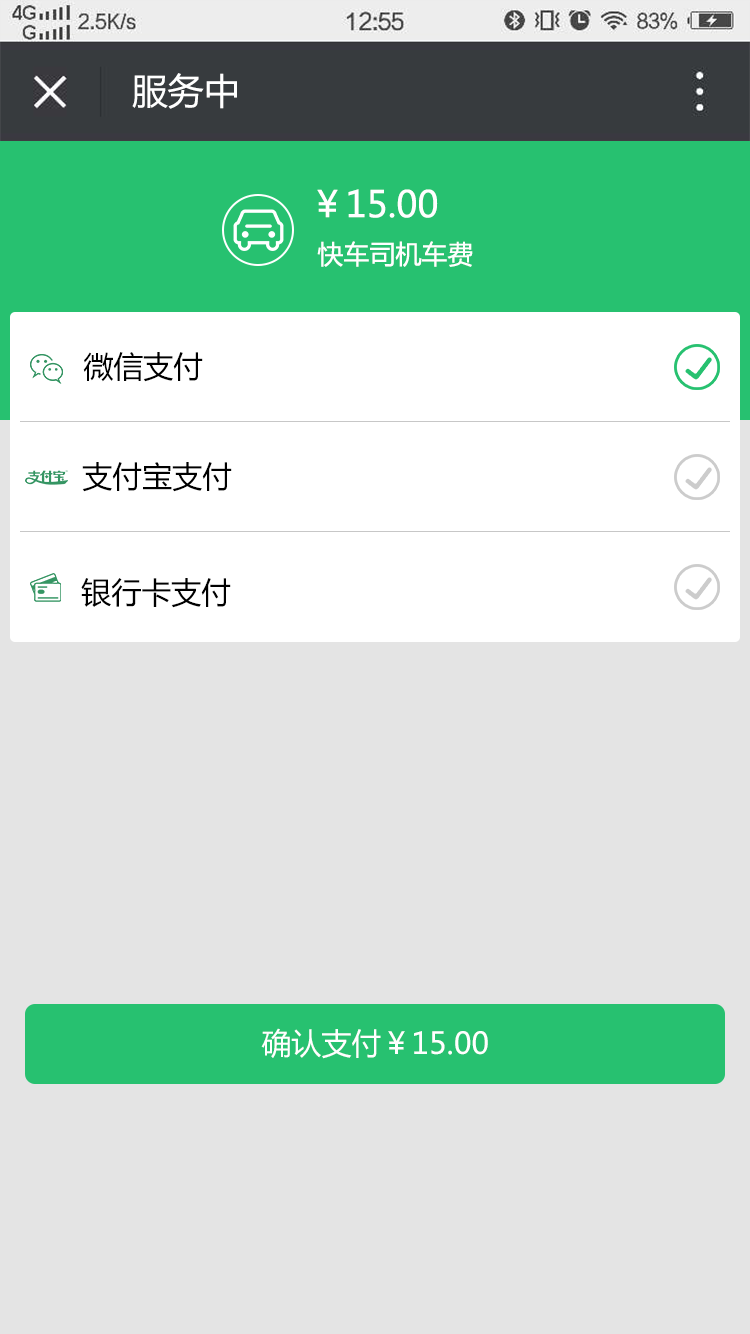
<style>
.page{position:relative;width:750px;height:1334px;background:#e4e4e4}
.page>*{position:absolute;margin:0}
.t1{font:36px "MicrosoftYaHei";color:#ffffff}
.t2{font:36px "MicrosoftYaHei";color:#ffffff;text-transform:uppercase}
.t3{font:26px "MicrosoftYaHei";color:#ffffff;text-transform:uppercase}
.t4{font:30px "MicrosoftYaHei";color:#000000}
.t5{font:30px "MicrosoftYaHei";color:#ffffff}
</style>
<div class="page">
<p class="t1" style="left:132px;top:73px;width:105px;height:36px">服务中</p>
<p class="t2" style="left:317px;top:189px;width:121px;height:29px">￥15.00</p>
<p class="t3" style="left:317px;top:241px;width:156px;height:26px">快车司机车费</p>
<p class="t4" style="left:83px;top:352px;width:120px;height:30px">微信支付</p>
<p class="t4" style="left:82px;top:462px;width:150px;height:30px">支付宝支付</p>
<p class="t4" style="left:81px;top:578px;width:150px;height:30px">银行卡支付</p>
<p class="t5" style="left:261px;top:1028px;width:227px;height:31px">确认支付￥15.00</p>
</div>
